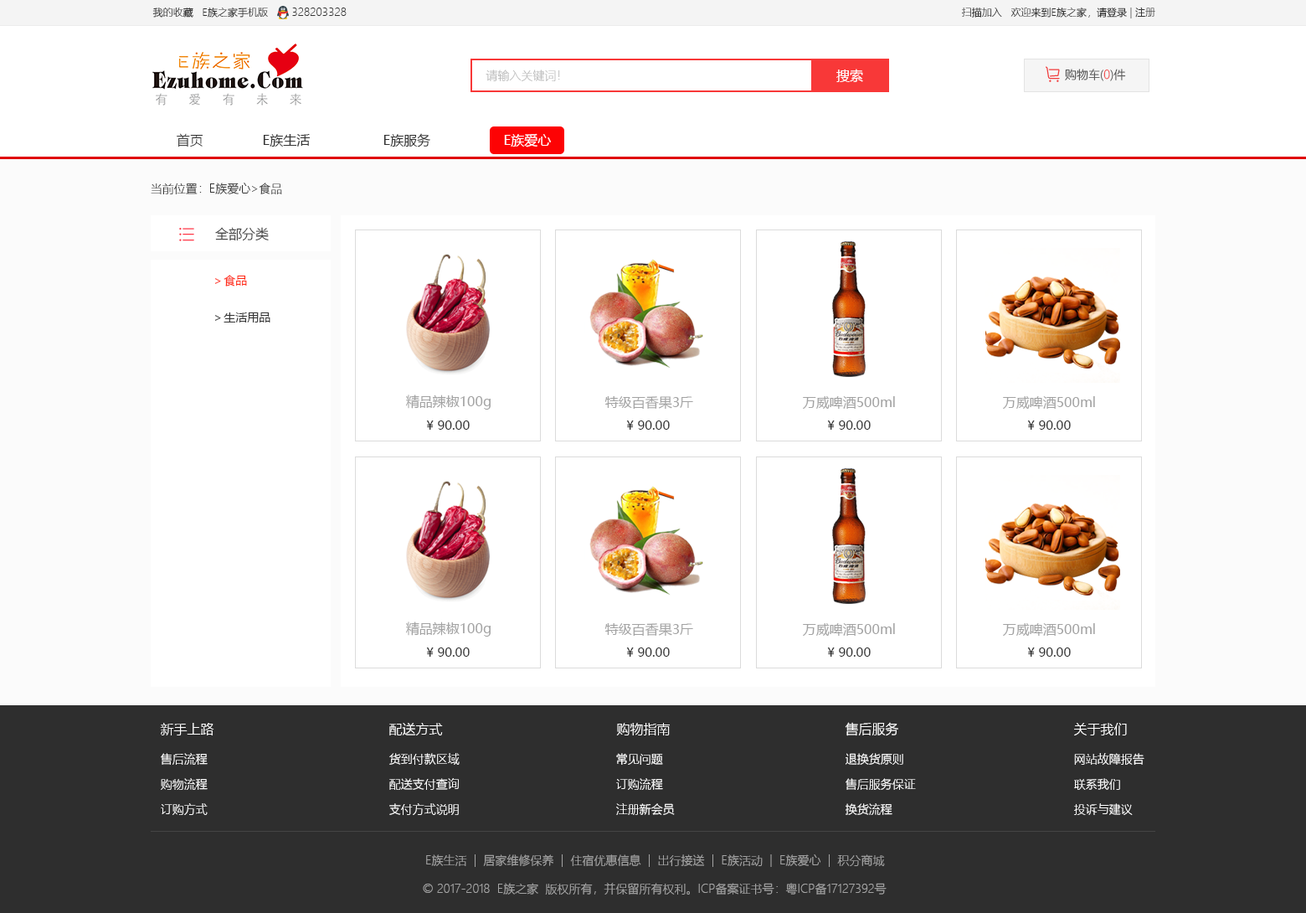
<style>
.page{position:relative;width:1306px;height:913px;background:#ffffff}
.page>*{position:absolute;margin:0}
.t1{font:10px "MicrosoftYaHeiLight";color:#333333}
.t2{font:11px "MicrosoftYaHeiLight";color:#333333}
.t3{font:11.7px "MicrosoftYaHeiLight";color:#bcbcbc}
.t4{font:13.4px "MicrosoftYaHei";color:#ffffff}
.t5{font:11.7px "MicrosoftYaHeiLight";color:#494949}
.t6{font:11.7px "MicrosoftYaHeiLight";color:#f13a3a}
.t7{font:11.7px "MicrosoftYaHeiLight";color:#484848}
.t8{font:13.4px "MicrosoftYaHeiLight";color:#333333}
.t9{font:13.4px "MicrosoftYaHei";color:#333333}
.t10{font:11.7px "MicrosoftYaHeiLight";color:#333333}
.t11{font:11.7px/36.8px "MicrosoftYaHei";color:#333333}
.t12{font:11.7px/36.8px "MicrosoftYaHei";color:#ff2c18}
.t13{font:13.4px "MicrosoftYaHei";color:#a3a3a3}
.t14{font:12.6px "MicrosoftYaHei";color:#333333}
.t15{font:13.4px "MicrosoftYaHeiLight";color:#ffffff}
.t16{font:11.7px/25.1px "MicrosoftYaHeiLight";color:#ffffff}
.t17{font:11.7px "MicrosoftYaHeiLight";color:#a4a4a4}
</style>
<div class="page">
<p class="t1" style="left:152px;top:7px;width:195px;height:11px">我的收藏   E族之家手机版        <span class="t2">328203328</span></p>
<p class="t1" style="left:962px;top:7px;width:194px;height:11px">扫描加入   欢迎来到E族之家，请登录 | 注册</p>
<p class="t3" style="left:486px;top:70px;width:74px;height:11px">请输入关键词！</p>
<p class="t4" style="left:837px;top:69px;width:26px;height:13px">搜索</p>
<p class="t5" style="left:1065px;top:69px;width:61px;height:12px">购物车(<span class="t6">0</span><span class="t7">)件</span></p>
<p class="t8" style="left:177px;top:133px;width:26px;height:14px">首页</p>
<p class="t9" style="left:263px;top:133px;width:288px;height:14px">E族生活   E族服务   <span class="t4">E族爱心</span></p>
<p class="t10" style="left:151px;top:183px;width:131px;height:11px">当前位置：E族爱心&gt;食品</p>
<p class="t8" style="left:215px;top:227px;width:54px;height:14px">全部分类</p>
<p class="t11" style="left:214px;top:275px;width:56px;height:47px"><span class="t12">＞食品<br></span>＞生活用品</p>
<p class="t13" style="left:406px;top:394px;width:85px;height:15px">精品辣椒100g</p>
<p class="t13" style="left:605px;top:396px;width:88px;height:13px">特级百香果3斤</p>
<p class="t13" style="left:803px;top:396px;width:92px;height:13px">万威啤酒500ml</p>
<p class="t13" style="left:1003px;top:396px;width:92px;height:13px">万威啤酒500ml</p>
<p class="t14" style="left:426px;top:420px;width:44px;height:10px">¥ 90.00</p>
<p class="t14" style="left:626px;top:420px;width:44px;height:10px">¥ 90.00</p>
<p class="t14" style="left:827px;top:420px;width:44px;height:10px">¥ 90.00</p>
<p class="t14" style="left:1028px;top:420px;width:43px;height:10px">¥ 90.00</p>
<p class="t13" style="left:406px;top:621px;width:85px;height:15px">精品辣椒100g</p>
<p class="t13" style="left:605px;top:623px;width:88px;height:13px">特级百香果3斤</p>
<p class="t13" style="left:803px;top:623px;width:92px;height:13px">万威啤酒500ml</p>
<p class="t13" style="left:1003px;top:623px;width:92px;height:13px">万威啤酒500ml</p>
<p class="t14" style="left:426px;top:647px;width:44px;height:10px">¥ 90.00</p>
<p class="t14" style="left:626px;top:647px;width:44px;height:10px">¥ 90.00</p>
<p class="t14" style="left:827px;top:647px;width:44px;height:10px">¥ 90.00</p>
<p class="t14" style="left:1028px;top:647px;width:43px;height:10px">¥ 90.00</p>
<p class="t15" style="left:160px;top:723px;width:54px;height:12px">新手上路</p>
<p class="t15" style="left:389px;top:723px;width:54px;height:12px">配送方式</p>
<p class="t15" style="left:616px;top:723px;width:54px;height:12px">购物指南</p>
<p class="t15" style="left:845px;top:722px;width:54px;height:14px">售后服务</p>
<p class="t15" style="left:1074px;top:723px;width:53px;height:12px">关于我们</p>
<p class="t16" style="left:161px;top:753px;width:47px;height:62px">售后流程<br>购物流程<br>订购方式</p>
<p class="t16" style="left:389px;top:753px;width:71px;height:62px">货到付款区域<br>配送支付查询<br>支付方式说明</p>
<p class="t16" style="left:616px;top:753px;width:59px;height:62px">常见问题<br>订购流程<br>注册新会员</p>
<p class="t16" style="left:846px;top:753px;width:70px;height:62px">退换货原则<br>售后服务保证<br>换货流程</p>
<p class="t16" style="left:1074px;top:753px;width:71px;height:62px">网站故障报告<br>联系我们<br>投诉与建议</p>
<p class="t17" style="left:426px;top:854px;width:459px;height:13px">E族生活  |  居家维修保养  |  住宿优惠信息  |  出行接送  |  E族活动  |  E族爱心  |  积分商城</p>
<p class="t17" style="left:423px;top:883px;width:464px;height:11px">© 2017-2018  E族之家  版权所有，并保留所有权利。ICP备案证书号：粤ICP备17127392号</p>
</div>
